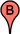
<style>
.page{position:relative;width:20px;height:34px;background:#ffffff}
.page>*{position:absolute;margin:0}
.t1{font:13px "ArialMT";color:#000000}
</style>
<div class="page">
<p class="t1" style="left:6px;top:5px;width:8px;height:10px">B</p>
</div>
